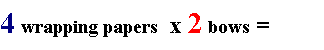
<style>
.page{position:relative;width:324px;height:50px;background:#ffffff}
.page>*{position:absolute;margin:0}
.t1{font:19px "TimesNewRomanPS-BoldMT";color:#000000}
.t2{font:30px "TimesNewRomanPS-BoldMT";color:#000082}
.t3{font:24px "TimesNewRomanPS-BoldMT";color:#000000}
.t4{font:30px "TimesNewRomanPS-BoldMT";color:#ff0000}
</style>
<div class="page">
<p class="t1" style="left:1px;top:13px;width:268px;height:24px"><span class="t2">4 </span>wrapping papers<span class="t3">  x </span><span class="t4">2</span> bows<span class="t3"> =</span></p>
</div>
